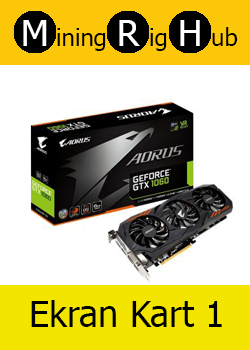
<style>
.page{position:relative;width:250px;height:350px;background:#ffffff}
.page>*{position:absolute;margin:0}
.t1{font:36px "Tahoma";color:#ffffff}
.t2{font:24px "Tahoma";color:#000000}
.t3{font:36px "Tahoma";color:#000000}
</style>
<div class="page">
<p class="t1" style="left:23px;top:20px;width:24px;height:26px">M</p>
<p class="t2" style="left:57px;top:28px;width:49px;height:23px">ining</p>
<p class="t1" style="left:119px;top:20px;width:21px;height:26px">R</p>
<p class="t2" style="left:150px;top:28px;width:17px;height:23px">ig</p>
<p class="t1" style="left:180px;top:20px;width:20px;height:26px">H</p>
<p class="t2" style="left:212px;top:27px;width:26px;height:19px">ub</p>
<p class="t3" style="left:31px;top:300px;width:191px;height:27px">Ekran Kart 1</p>
</div>
